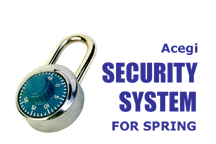
<style>
.page{position:relative;width:216px;height:144px;background:#ffffff}
.page>*{position:absolute;margin:0}
.t1{font:12px "Verdana-Bold";color:#333399}
.t2{font:25px "Impact";color:#333399}
</style>
<div class="page">
<p class="t1" style="left:161px;top:43px;width:37px;height:12px">Acegi</p>
<p class="t2" style="left:102px;top:62px;width:96px;height:21px">SECURITY</p>
<p class="t2" style="left:119px;top:91px;width:77px;height:21px">SYSTEM</p>
<p class="t1" style="left:112px;top:121px;width:84px;height:10px">FOR SPRING</p>
</div>
